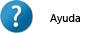
<style>
.page{position:relative;width:109px;height:33px;background:#ffffff}
.page>*{position:absolute;margin:0}
.t1{font:11px "SegoeUI";color:#000000}
</style>
<div class="page">
<p class="t1" style="left:50px;top:14px;width:30px;height:10px">Ayuda</p>
</div>
